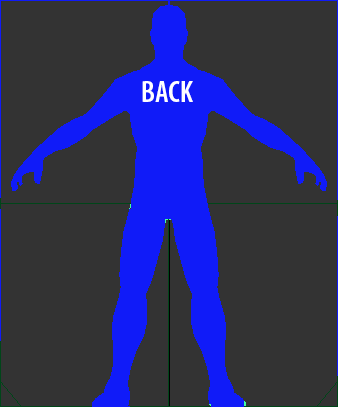
<style>
.page{position:relative;width:338px;height:407px;background:#333333}
.page>*{position:absolute;margin:0}
.t1{font:30px "MyriadPro-SemiboldCond";letter-spacing:0.01em;color:#ffffff;text-transform:uppercase}
</style>
<div class="page">
<p class="t1" style="left:142px;top:81px;width:51px;height:21px">BACK</p>
</div>
